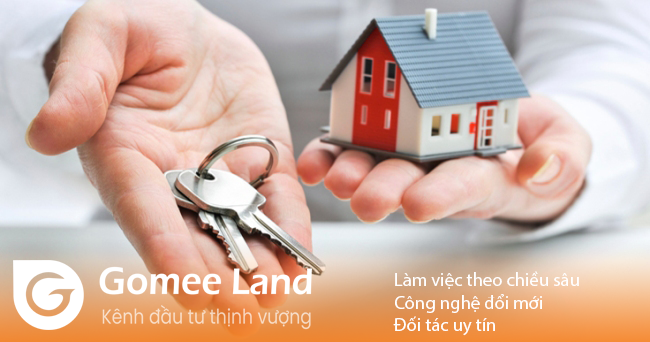
<style>
.page{position:relative;width:650px;height:342px}
.page>*{position:absolute;margin:0}
.t1{font:18.7px "MyriadPro-Regular";color:#ffffff}
</style>
<div class="page">
<p class="t1" style="left:393px;top:271px;width:186px;height:65px">Làm việc theo chiều sâu<br>Công nghệ đổi mới<br>Đối tác uy tín</p>
</div>
